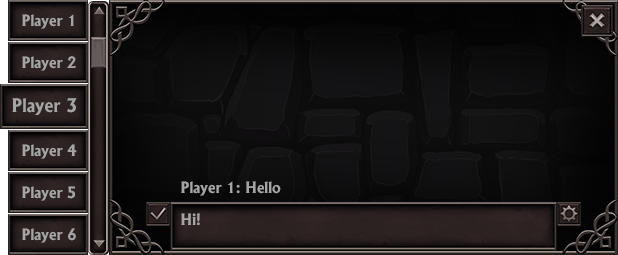
<style>
.page{position:relative;width:618px;height:255px}
.page>*{position:absolute;margin:0}
.t1{font:15px "AlbertusBold-Regular";color:#a5a5a5}
.t2{font:18px "AlbertusBold-Regular";color:#a5a5a5}
</style>
<div class="page">
<p class="t1" style="left:22px;top:14px;width:52px;height:15px">Player 1</p>
<p class="t1" style="left:22px;top:56px;width:54px;height:15px">Player 2</p>
<p class="t2" style="left:12px;top:98px;width:65px;height:17px">Player 3</p>
<p class="t1" style="left:22px;top:144px;width:55px;height:15px">Player 4</p>
<p class="t1" style="left:181px;top:181px;width:100px;height:15px">Player 1: Hello</p>
<p class="t1" style="left:22px;top:186px;width:53px;height:15px">Player 5</p>
<p class="t1" style="left:181px;top:213px;width:19px;height:13px">Hi!</p>
<p class="t1" style="left:22px;top:228px;width:54px;height:15px">Player 6</p>
</div>
